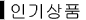
<style>
.page{position:relative;width:86px;height:20px;background:#ffffff}
.page>*{position:absolute;margin:0}
.t1{font:18px "Fixedsys";color:#000000}
</style>
<div class="page">
<p class="t1" style="left:11px;top:4px;width:69px;height:15px">인기상품</p>
</div>
